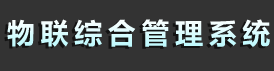
<style>
.page{position:relative;width:274px;height:71px;background:#333333}
.page>*{position:absolute;margin:0}
.t1{font:28px "MicrosoftYaHei";letter-spacing:0.2em}
</style>
<div class="page">
<p class="t1" style="left:7px;top:19px;width:263px;height:28px">物联综合管理系统</p>
</div>
